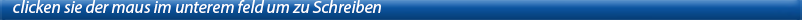
<style>
.page{position:relative;width:802px;height:20px}
.page>*{position:absolute;margin:0}
.t1{font:17.5px "MyriadPro-It";color:#ffffff}
.t2{font:17.5px "MyriadPro-Regular";color:#ffffff}
</style>
<div class="page">
<p class="t1" style="left:13px;top:0px;width:368px;height:13px"><span class="t2"> </span> clicken sie der maus im unterem feld um zu Schreiben</p>
</div>
